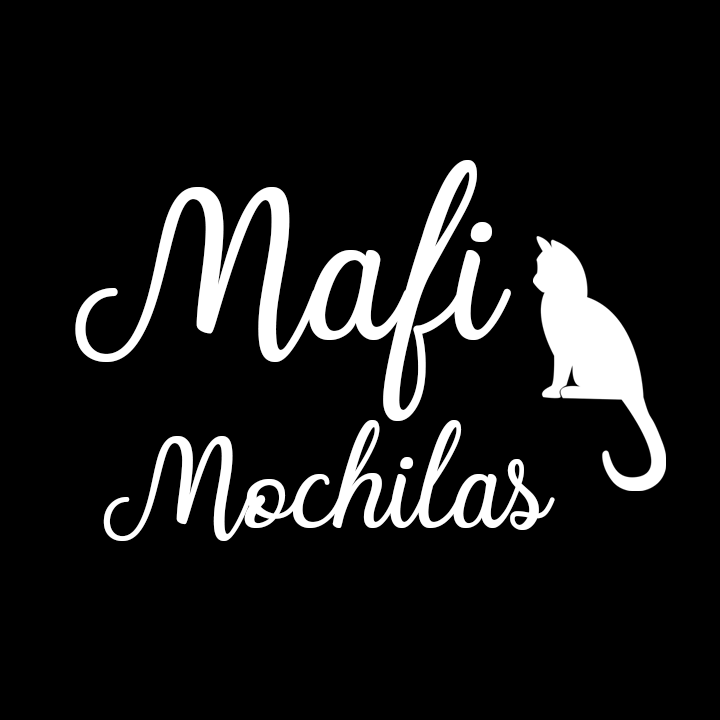
<style>
.page{position:relative;width:720px;height:720px;background:#000000}
.page>*{position:absolute;margin:0}
.t1{font:173.5px "Charline";color:#ffffff}
.t2{font:104.1px "Charline";color:#ffffff}
</style>
<div class="page">
<p class="t1" style="left:75px;top:160px;width:436px;height:261px">Mafi</p>
<p class="t2" style="left:103px;top:420px;width:452px;height:121px">Mochilas</p>
</div>
